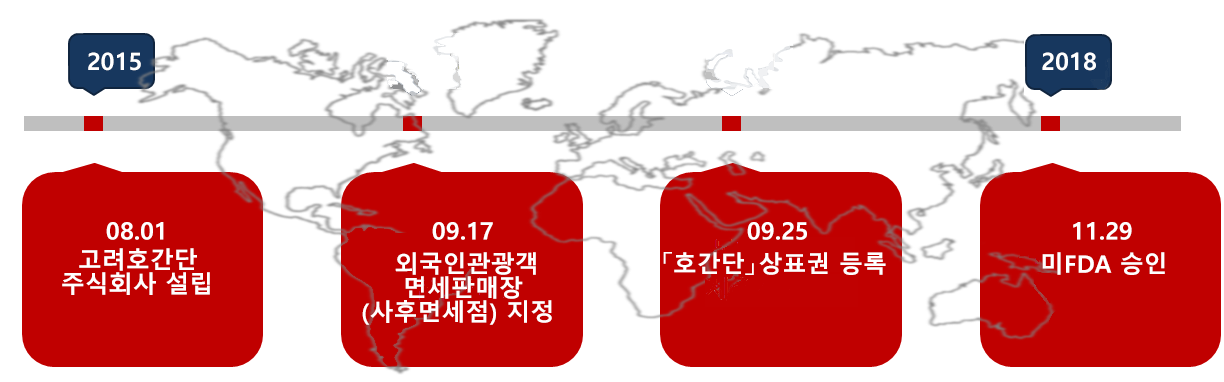
<style>
.page{position:relative;width:1224px;height:382px;background:#ffffff}
.page>*{position:absolute;margin:0}
.t1{font:24px "MalgunGothicBold";color:#ffffff}
.t2{font:24px/24px "MalgunGothicBold";color:#ffffff}
</style>
<div class="page">
<p class="t1" style="left:88px;top:52px;width:53px;height:19px">2015</p>
<p class="t1" style="left:1042px;top:52px;width:54px;height:19px">2018</p>
<p class="t1" style="left:106px;top:222px;width:58px;height:18px">08.01</p>
<p class="t1" style="left:432px;top:222px;width:61px;height:18px">09.17</p>
<p class="t1" style="left:747px;top:222px;width:60px;height:18px">09.25</p>
<p class="t1" style="left:1073px;top:222px;width:59px;height:18px">11.29</p>
<p class="t2" style="left:62px;top:248px;width:148px;height:47px">고려호간단<br>    주식회사 설립</p>
<p class="t2" style="left:362px;top:252px;width:190px;height:73px">외국인관광객        <br>       면세판매장<br>  (사후면세점) 지정</p>
<p class="t1" style="left:663px;top:252px;width:223px;height:23px">「호간단」상표권 등록</p>
<p class="t1" style="left:1042px;top:252px;width:123px;height:23px">미FDA 승인</p>
</div>
